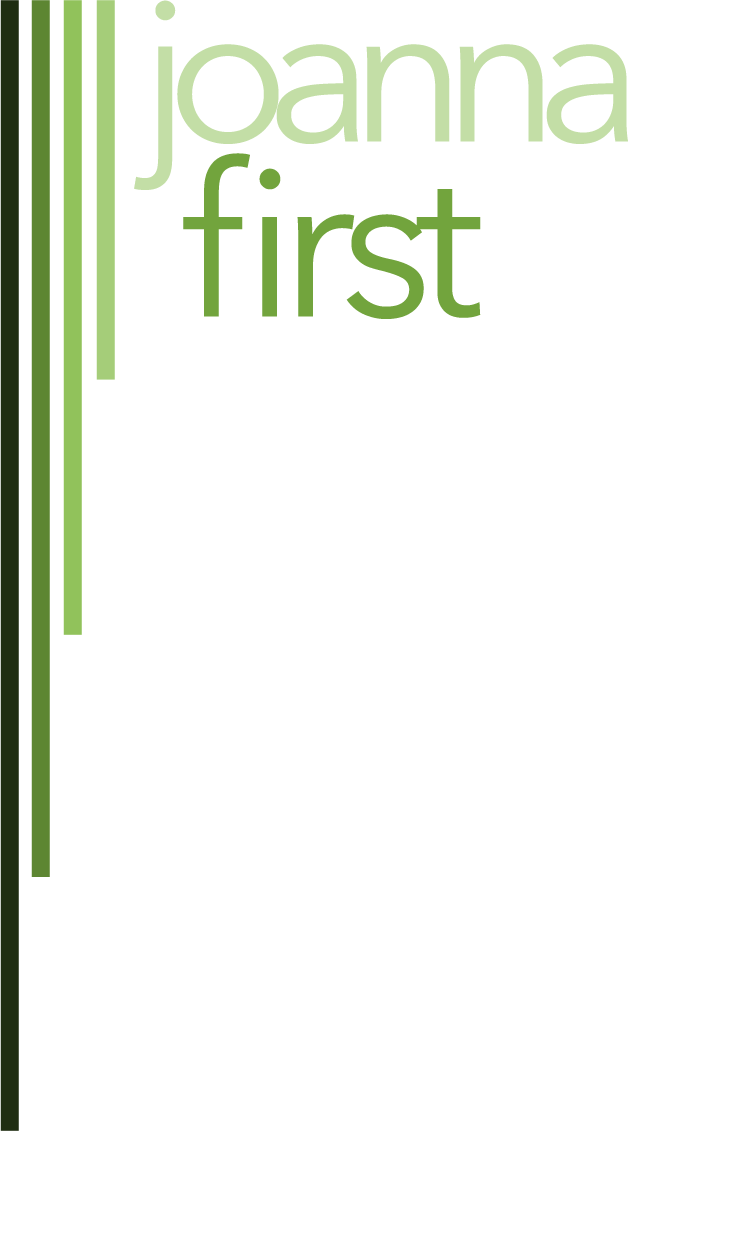
<style>
.page{position:relative;width:750px;height:1250px;background:#ffffff}
.page>*{position:absolute;margin:0}
.t1{font:202.2px "AvenirNext-Regular";letter-spacing:-0.12em;color:#c3dea6}
.t2{font:212.1px "AvenirNext-Regular";letter-spacing:-0.08em;color:#72a43d}
</style>
<div class="page">
<p class="t1" style="left:134px;top:0px;width:494px;height:190px">joanna</p>
<p class="t2" style="left:183px;top:153px;width:298px;height:166px">first</p>
</div>
